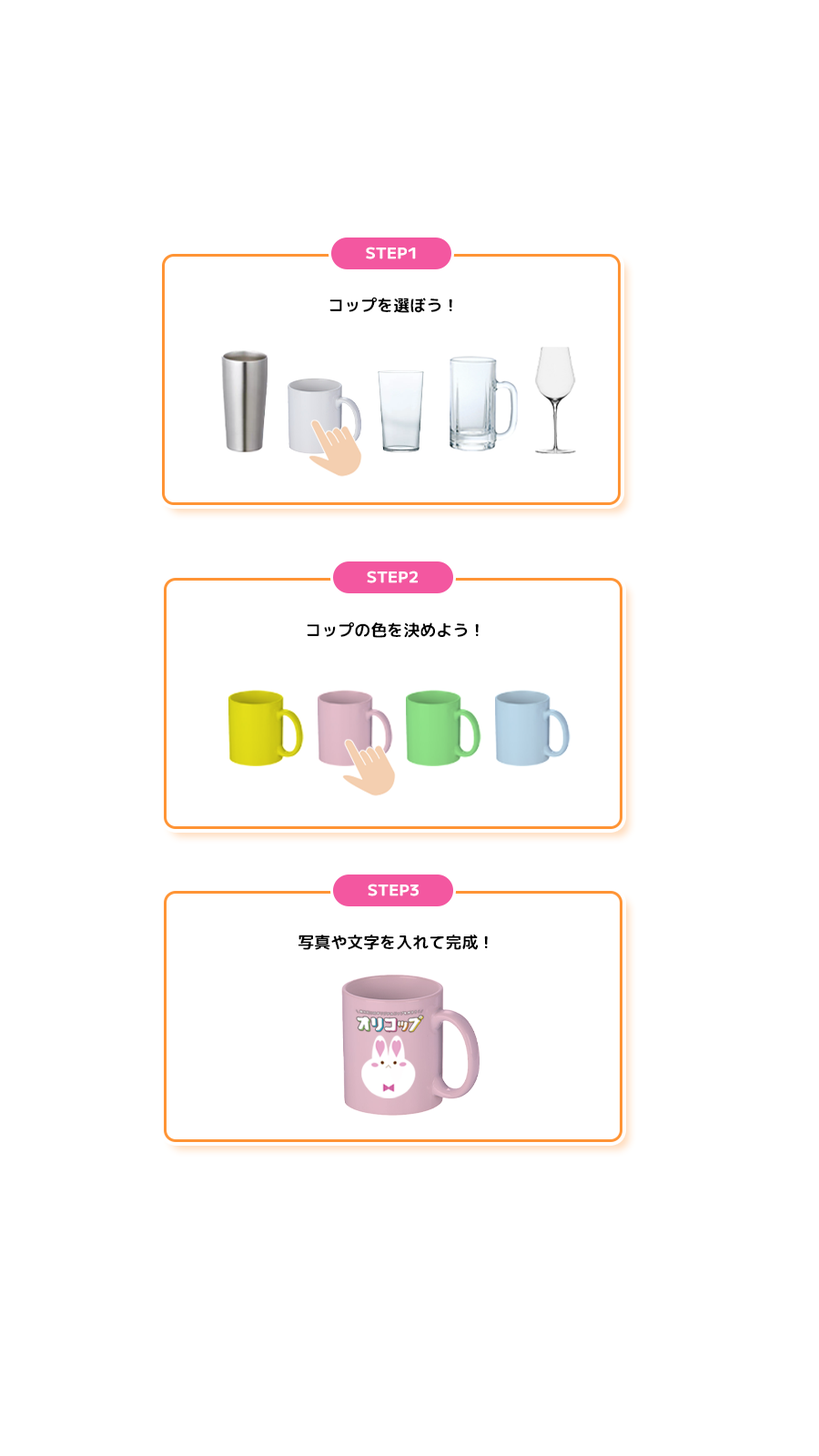
<style>
.page{position:relative;width:819px;height:1456px;background:#ffffff}
.page>*{position:absolute;margin:0}
.t1{font:14.8px "MPLUS1-SemiBold";letter-spacing:0.04em;color:#ffffff}
.t2{font:16.4px "RoundedMplus1c-Bold";color:#000000}
</style>
<div class="page">
<p class="t1" style="left:366px;top:247px;width:50px;height:12px">STEP1</p>
<p class="t2" style="left:329px;top:297px;width:123px;height:16px">コップを選ぼう！</p>
<p class="t1" style="left:367px;top:571px;width:51px;height:12px">STEP2</p>
<p class="t2" style="left:307px;top:622px;width:172px;height:16px">コップの色を決めよう！</p>
<p class="t1" style="left:368px;top:884px;width:51px;height:12px">STEP3</p>
<p class="t2" style="left:298px;top:935px;width:190px;height:15px">写真や文字を入れて完成！</p>
</div>
